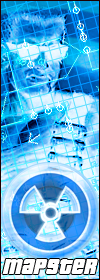
<style>
.page{position:relative;width:100px;height:280px}
.page>*{position:absolute;margin:0}
.t1{font:30.8px "Pricedown";color:#fffffe}
</style>
<div class="page">
<p class="t1" style="left:2px;top:259px;width:96px;height:15px">mapster</p>
</div>
